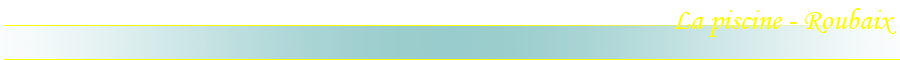
<style>
.page{position:relative;width:900px;height:60px;background:#ffffff}
.page>*{position:absolute;margin:0}
.t1{font:30px "MonotypeCorsiva";color:#fefb01}
</style>
<div class="page">
<p class="t1" style="left:674px;top:8px;width:222px;height:29px">La piscine - Roubaix</p>
</div>
